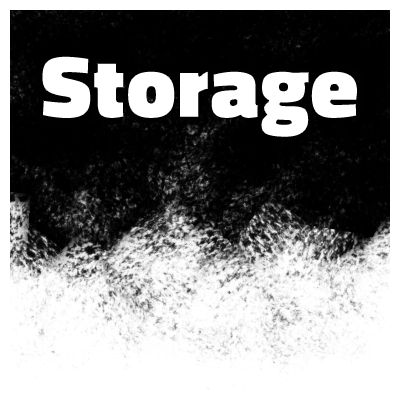
<style>
.page{position:relative;width:400px;height:400px;background:#ffffff}
.page>*{position:absolute;margin:0}
.t1{font:94.6px "TitilliumWeb-Black"}
.t2{font:90.8px "TitilliumWeb-Black";color:#ffffff}
</style>
<div class="page">
<p class="t1" style="left:34px;top:61px;width:331px;height:76px;rotate:-3deg">Storage</p>
<p class="t2" style="left:41px;top:55px;width:317px;height:83px">Storage</p>
</div>
